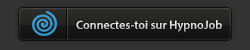
<style>
.page{position:relative;width:250px;height:50px;background:#333333}
.page>*{position:absolute;margin:0}
.t1{font:12px "MyriadPro-Semibold";color:#dadada}
</style>
<div class="page">
<p class="t1" style="left:76px;top:20px;width:146px;height:12px">Connectes-toi sur HypnoJob</p>
</div>
